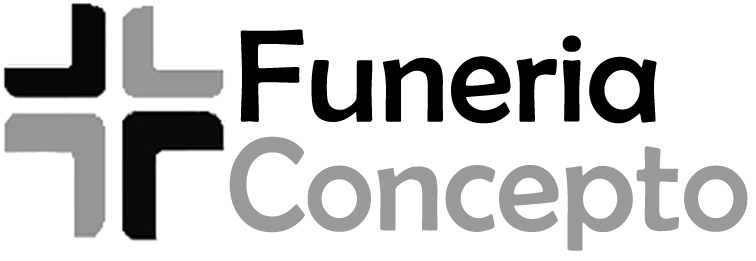
<style>
.page{position:relative;width:756px;height:261px;background:#ffffff}
.page>*{position:absolute;margin:0}
.t1{font:133.3px "BerlinSansFB-Reg";color:#000000}
.t2{font:133.3px "BerlinSansFB-Reg";color:#999999}
</style>
<div class="page">
<p class="t1" style="left:240px;top:29px;width:417px;height:95px">Funeria</p>
<p class="t2" style="left:229px;top:136px;width:519px;height:115px">Concepto</p>
</div>
